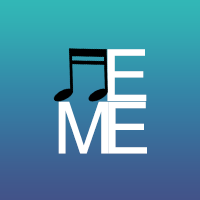
<style>
.page{position:relative;width:200px;height:200px}
.page>*{position:absolute;margin:0}
.t1{font:72px "ArialMT";color:#ffffff}
</style>
<div class="page">
<p class="t1" style="left:107px;top:49px;width:40px;height:52px">E</p>
<p class="t1" style="left:58px;top:101px;width:51px;height:53px">M</p>
<p class="t1" style="left:108px;top:101px;width:39px;height:53px">E</p>
</div>
